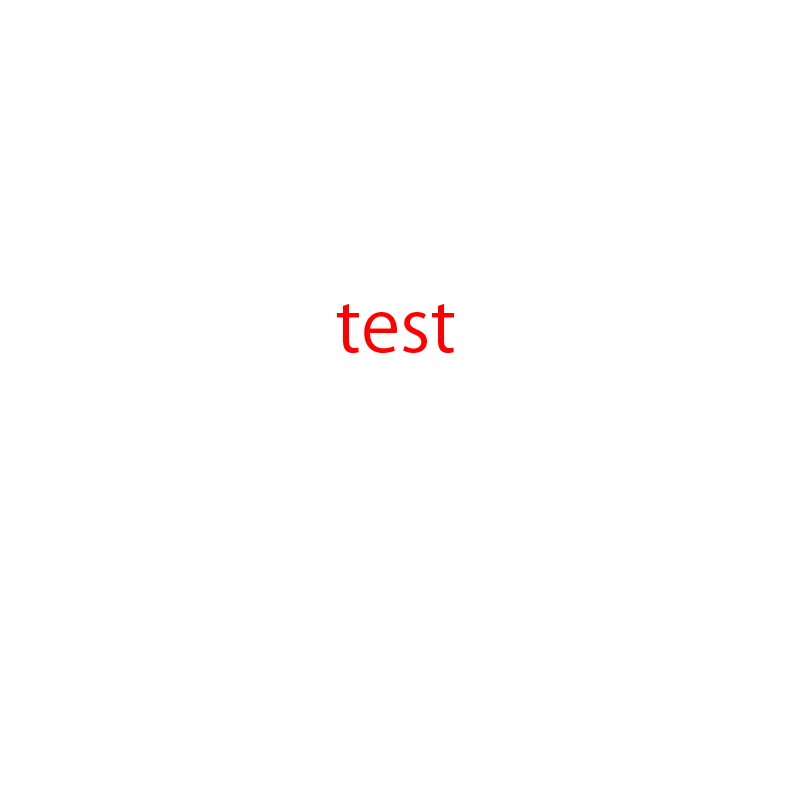
<style>
.page{position:relative;width:800px;height:800px;background:#ffffff}
.page>*{position:absolute;margin:0}
.t1{font:72px "KozGoPro-Regular";color:#ff0000}
</style>
<div class="page">
<p class="t1" style="left:337px;top:304px;width:117px;height:49px">test</p>
</div>
